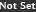
<style>
.page{position:relative;width:36px;height:12px;background:#333333}
.page>*{position:absolute;margin:0}
.t1{font:10px "AmiraParadiso";letter-spacing:0.05em;color:#ffffff}
</style>
<div class="page">
<p class="t1" style="left:0px;top:2px;width:36px;height:7px">Not Set</p>
</div>
